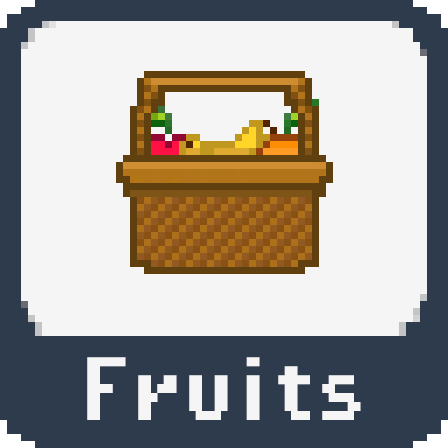
<style>
.page{position:relative;width:448px;height:448px;background:#f5f5f5}
.page>*{position:absolute;margin:0}
.t1{font:71.8px "PixelOperator8-Bold";color:#f5f5f5;scale:0.71 1}
</style>
<div class="page">
<p class="t1" style="left:87px;top:357px;width:274px;height:63px">Fruits</p>
</div>
